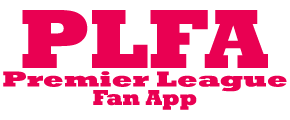
<style>
.page{position:relative;width:290px;height:120px;background:#ffffff}
.page>*{position:absolute;margin:0}
.t1{font:21.9px "Rockwell-ExtraBold";color:#e90052;scale:1.36 1}
.t2{font:21.9px "Rockwell-ExtraBold";color:#e90052}
</style>
<div class="page">
<p class="t1" style="left:3px;top:71px;width:284px;height:21px">Premier League</p>
<p class="t2" style="left:93px;top:90px;width:104px;height:20px">Fan App</p>
</div>
